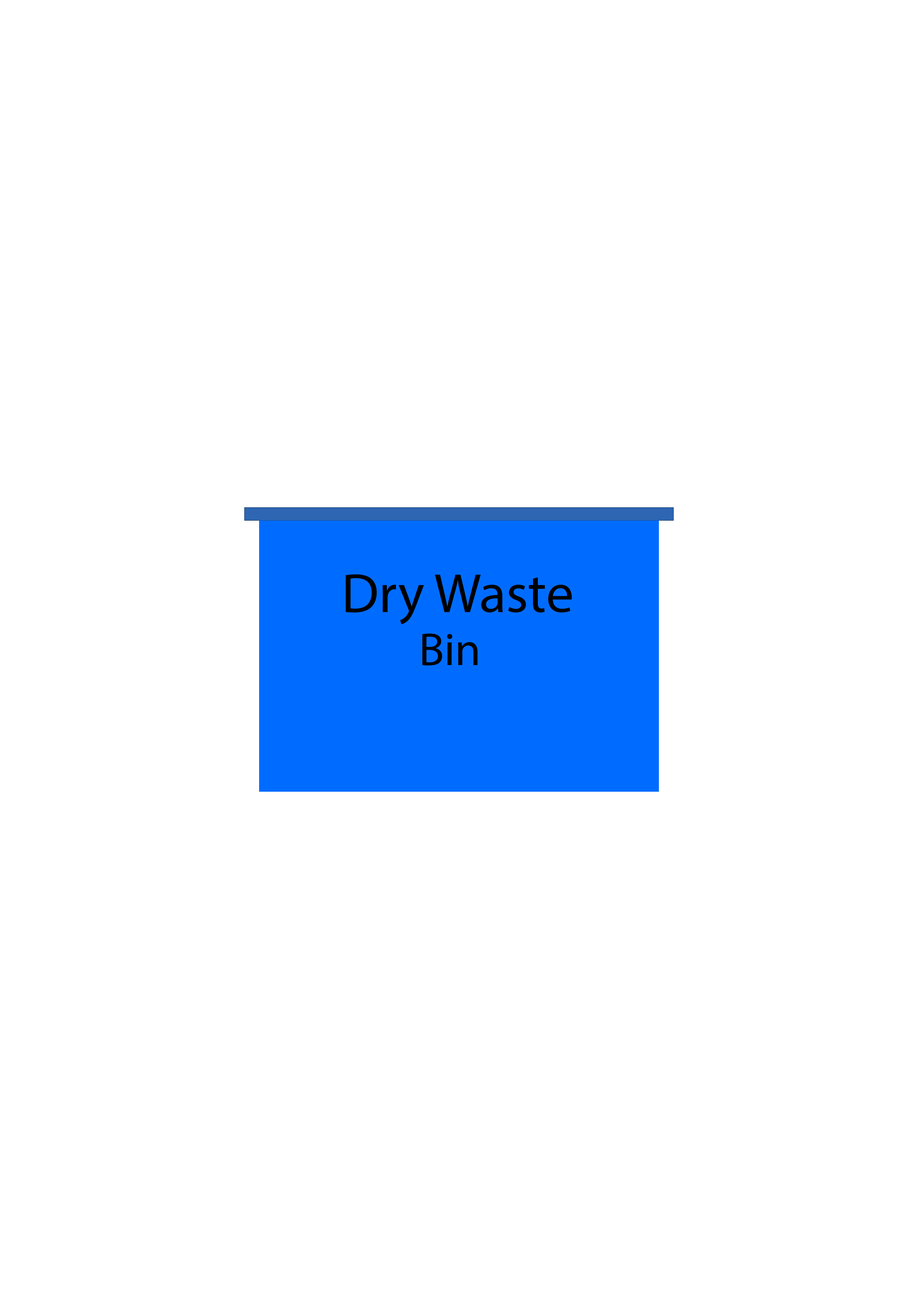
<style>
.page{position:relative;width:918px;height:1299px;background:#ffffff}
.page>*{position:absolute;margin:0}
.t1{font:55.5px "MyriadPro-Regular";color:#000000}
.t2{font:46.3px "MyriadPro-Regular";color:#000000}
</style>
<div class="page">
<p class="t1" style="left:346px;top:574px;width:226px;height:50px">Dry Waste</p>
<p class="t2" style="left:422px;top:633px;width:56px;height:33px">Bin</p>
</div>
